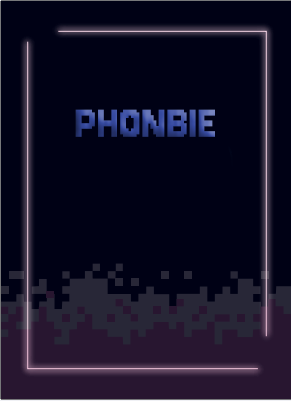
<style>
.page{position:relative;width:291px;height:401px;background:#000115}
.page>*{position:absolute;margin:0}
.t1{font:50px "Jersey10-Regular";letter-spacing:0.025em}
</style>
<div class="page">
<p class="t1" style="left:75px;top:109px;width:140px;height:28px">PHONBIE</p>
</div>
